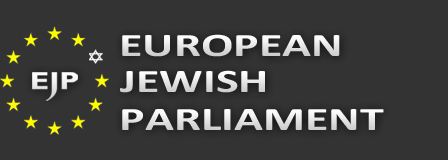
<style>
.page{position:relative;width:448px;height:160px;background:#333333}
.page>*{position:absolute;margin:0}
.t1{font:33.1px "Calibri-Bold";text-transform:uppercase;scale:1.45 1}
.t2{font:33.1px "Calibri-Bold";color:#e7e7e7;text-transform:uppercase;scale:1.45 1}
</style>
<div class="page">
<p class="t1" style="left:122px;top:34px;width:218px;height:23px">european</p>
<p class="t1" style="left:120px;top:70px;width:145px;height:23px">jewish</p>
<p class="t2" style="left:122px;top:109px;width:262px;height:21px">parliament</p>
</div>
